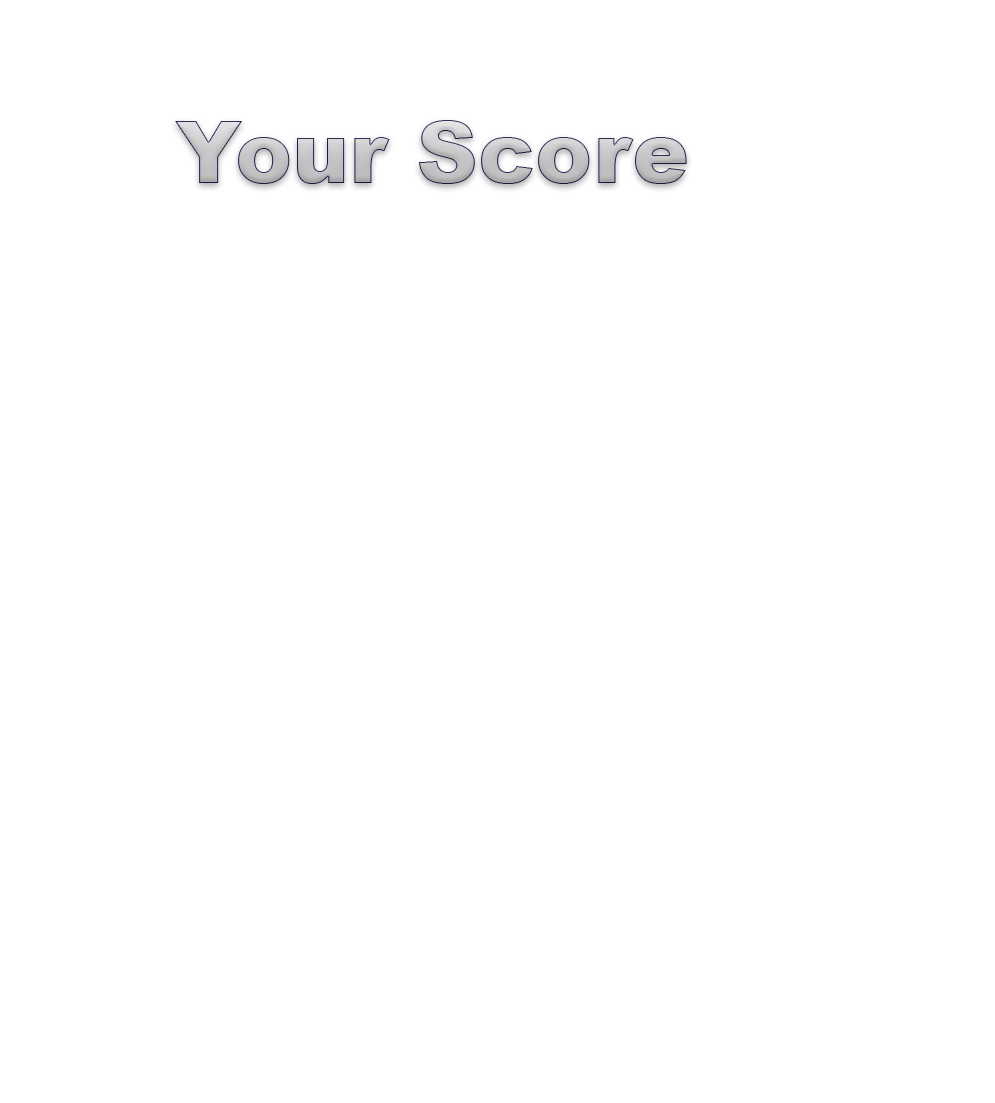
<style>
.page{position:relative;width:995px;height:1103px;background:#ffffff}
.page>*{position:absolute;margin:0}
.t1{font:85.9px "Arial-Black"}
</style>
<div class="page">
<p class="t1" style="left:175px;top:120px;width:512px;height:64px">Your Score</p>
</div>
